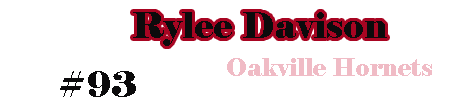
<style>
.page{position:relative;width:450px;height:100px;background:#ffffff}
.page>*{position:absolute;margin:0}
.t1{font:36px "Elephant-Regular";color:#0c0b0c}
.t2{font:24px "Elephant-Regular";color:#f0bbc5}
</style>
<div class="page">
<p class="t1" style="left:133px;top:12px;width:254px;height:34px">Rylee Davison</p>
<p class="t2" style="left:227px;top:58px;width:205px;height:18px">Oakville Hornets</p>
<p class="t1" style="left:60px;top:71px;width:76px;height:26px">#93</p>
</div>
